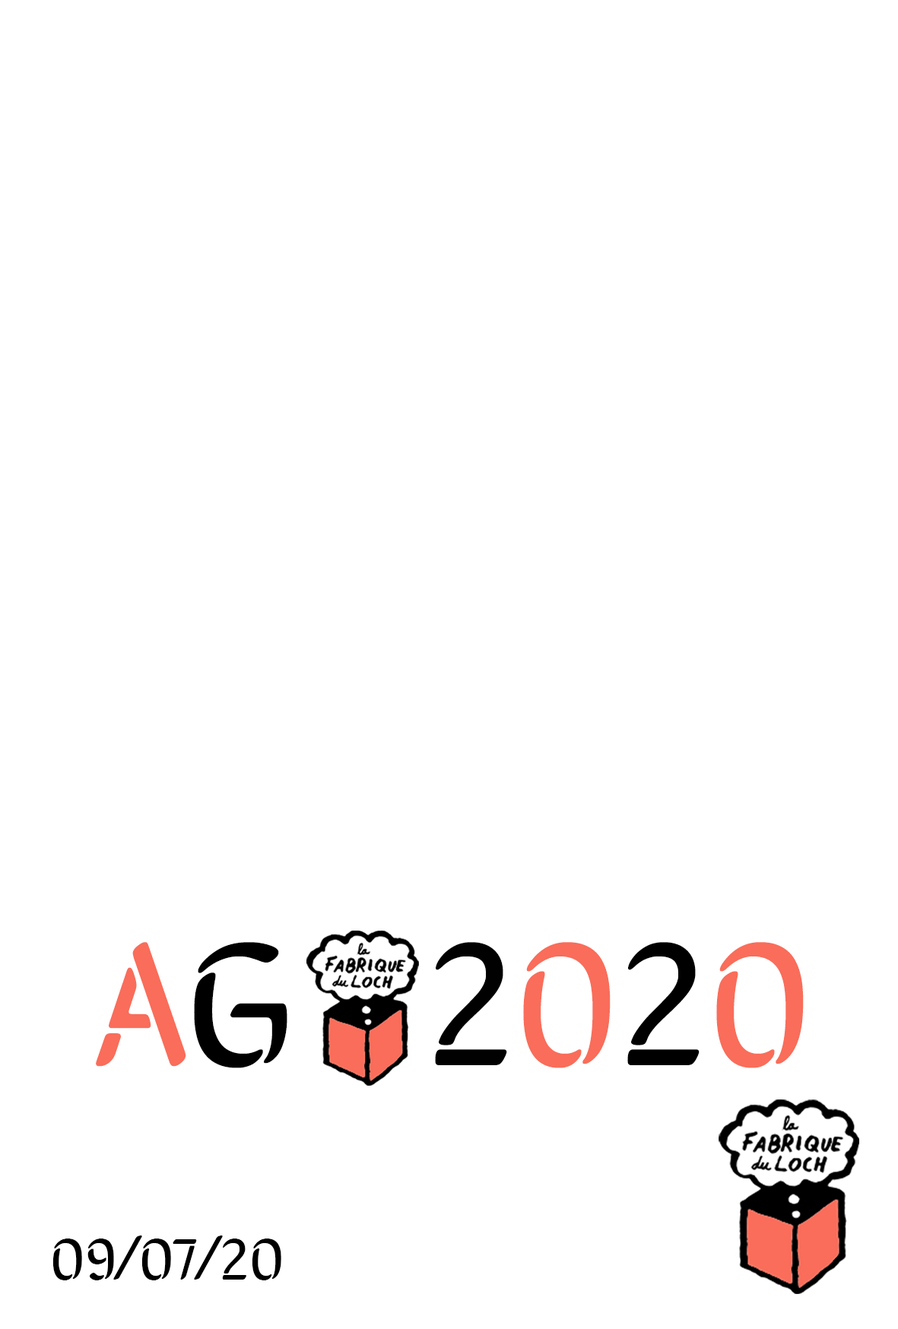
<style>
.page{position:relative;width:898px;height:1329px;background:#ffffff}
.page>*{position:absolute;margin:0}
.t1{font:175.6px "SirinStencil-Regular";color:#f96d5a}
.t2{font:175.6px "SirinStencil-Regular";color:#000000}
.t3{font:175.6px "SirinStencil-Regular";color:#010101}
.t4{font:58.4px "SirinStencil-Regular";color:#000000}
</style>
<div class="page">
<p class="t1" style="left:96px;top:942px;width:191px;height:126px">A<span class="t2">G</span></p>
<p class="t3" style="left:435px;top:942px;width:368px;height:126px">2<span class="t1">0</span><span class="t2">2</span><span class="t1">0</span></p>
<p class="t4" style="left:52px;top:1235px;width:229px;height:45px">09/07/20</p>
</div>
